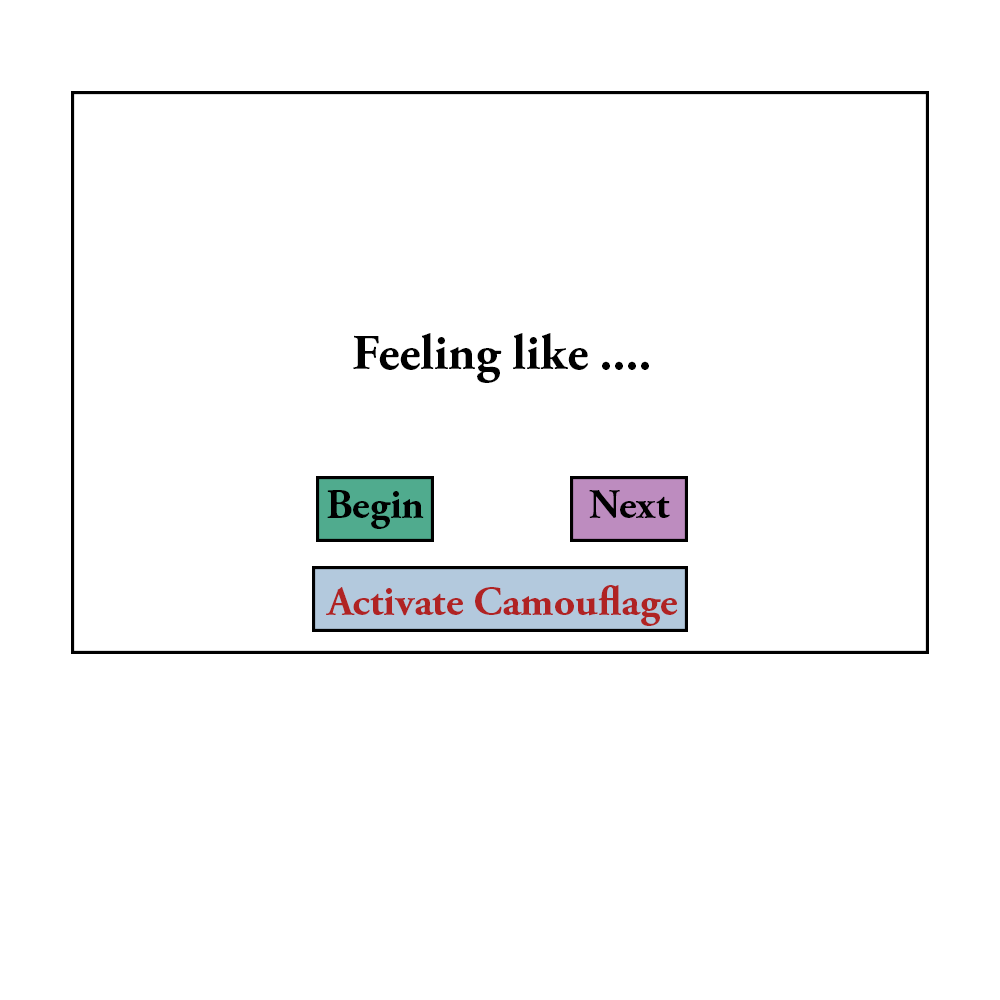
<style>
.page{position:relative;width:1000px;height:1000px;background:#ffffff}
.page>*{position:absolute;margin:0}
.t1{font:50px "AGaramondPro-Bold";color:#000000}
.t2{font:41.7px "AGaramondPro-Bold";color:#000000}
.t3{font:41.7px "AGaramondPro-Bold";color:#b02323}
</style>
<div class="page">
<p class="t1" style="left:353px;top:333px;width:296px;height:50px">Feeling like ....</p>
<p class="t2" style="left:327px;top:490px;width:97px;height:39px">Begin</p>
<p class="t2" style="left:589px;top:490px;width:81px;height:28px">Next</p>
<p class="t3" style="left:326px;top:585px;width:352px;height:41px">Activate Camouflage</p>
</div>
